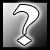
<style>
.page{position:relative;width:50px;height:50px}
.page>*{position:absolute;margin:0}
.t1{font:60px "OldEnglishTextMT";color:#ffffff;scale:1.5 1}
</style>
<div class="page">
<p class="t1" style="left:13px;top:5px;width:26px;height:40px">?</p>
</div>
